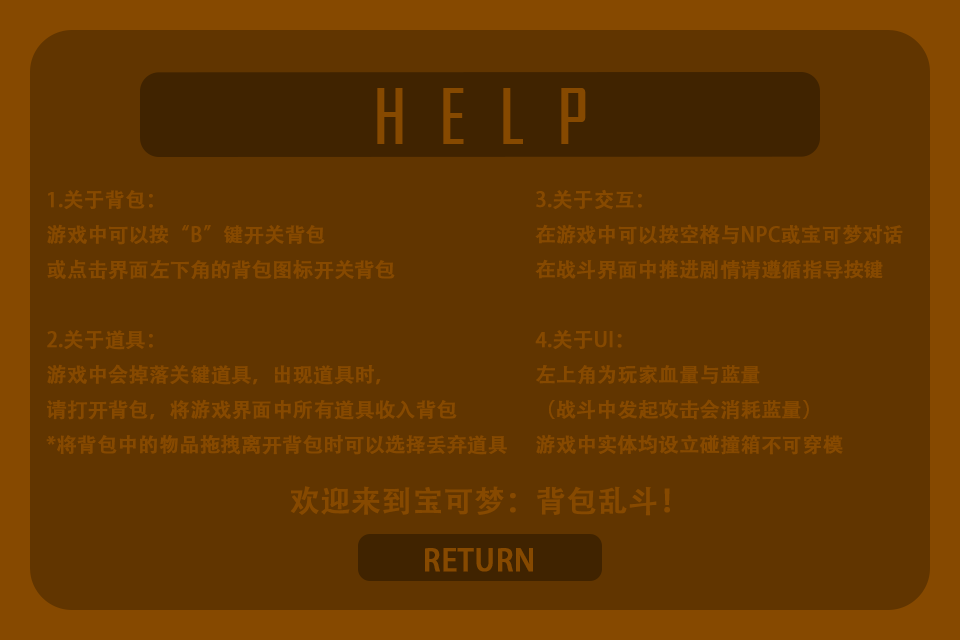
<style>
.page{position:relative;width:960px;height:640px;background:#613500}
.page>*{position:absolute;margin:0}
.t1{font:72px "AgencyFB-Reg";color:#864900;font-weight:bold}
.t2{font:20px "AdobeHeitiStd-Regular";color:#864900;font-weight:bold}
.t3{font:30px "AdobeHeitiStd-Regular";color:#864900;font-weight:bold}
.t4{font:29.4px "AdobeHeitiStd-Regular";color:#864900;font-weight:bold}
</style>
<div class="page">
<p class="t1" style="left:377px;top:88px;width:209px;height:56px">H  E  L  P</p>
<p class="t2" style="left:46px;top:190px;width:461px;height:265px">1.关于背包：<br>游戏中可以按“B”键开关背包<br>或点击界面左下角的背包图标开关背包<br><br>2.关于道具：<br>游戏中会掉落关键道具，出现道具时，<br>请打开背包，将游戏界面中所有道具收入背包<br>*将背包中的物品拖拽离开背包时可以选择丢弃道具</p>
<p class="t2" style="left:535px;top:189px;width:368px;height:266px">3.关于交互：<br>在游戏中可以按空格与NPC或宝可梦对话<br>在战斗界面中推进剧情请遵循指导按键<br><br>4.关于UI：<br>左上角为玩家血量与蓝量<br>（战斗中发起攻击会消耗蓝量）<br>游戏中实体均设立碰撞箱不可穿模</p>
<p class="t3" style="left:290px;top:486px;width:380px;height:30px">欢迎来到宝可梦：背包乱斗！</p>
<p class="t4" style="left:425px;top:548px;width:108px;height:24px">RETURN</p>
</div>
